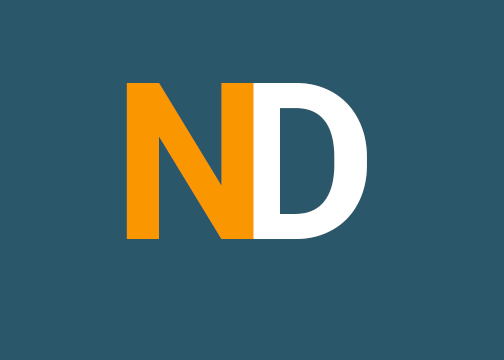
<style>
.page{position:relative;width:504px;height:360px;background:#2a5769}
.page>*{position:absolute;margin:0}
.t1{font:218.6px "Roboto-Bold";color:#fa9600}
.t2{font:218.6px "Roboto-Bold";color:#ffffff}
</style>
<div class="page">
<p class="t1" style="left:126px;top:83px;width:128px;height:156px">N</p>
<p class="t2" style="left:247px;top:83px;width:120px;height:156px">D</p>
</div>
